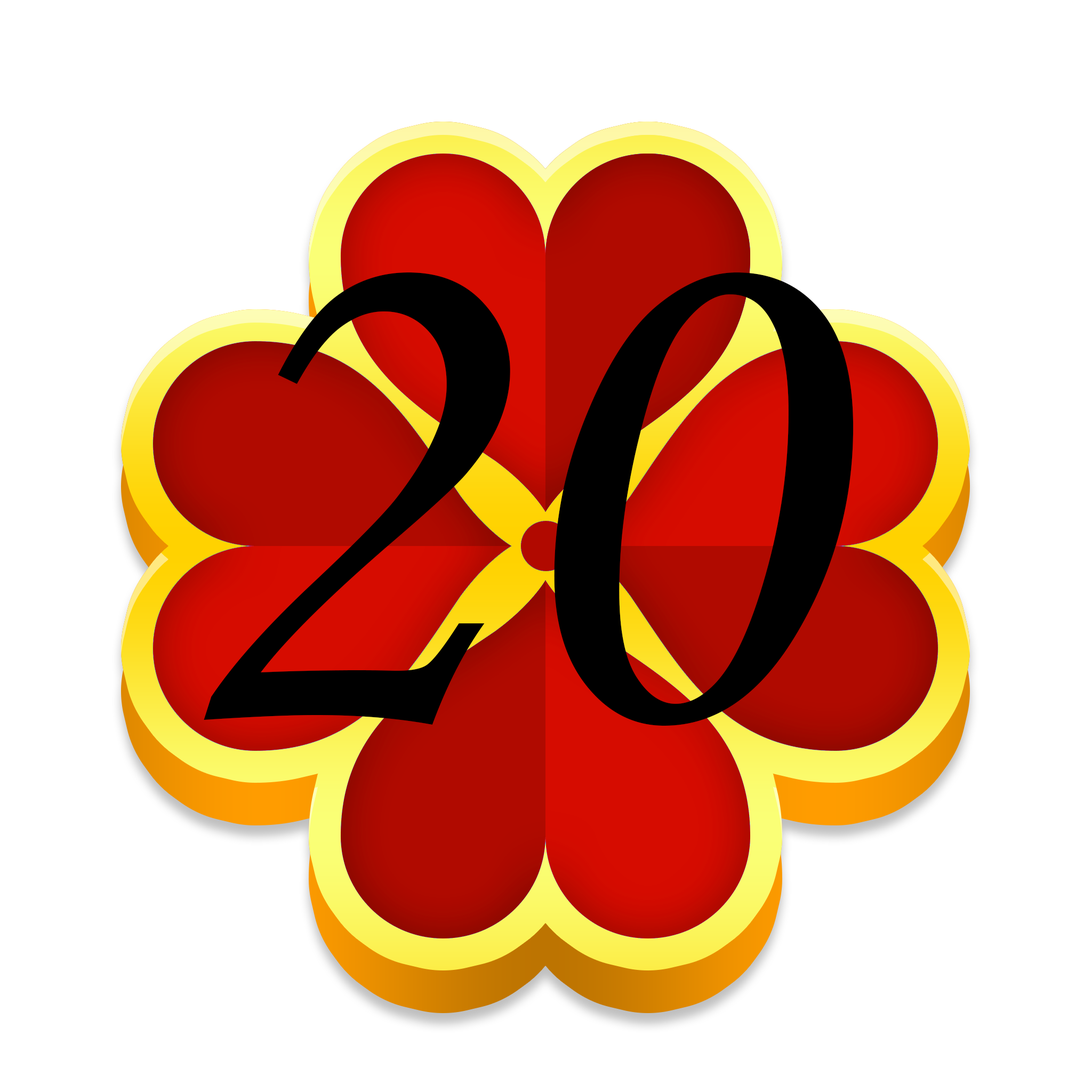
<style>
.page{position:relative;width:1092px;height:1092px;background:#ffffff}
.page>*{position:absolute;margin:0}
.t1{font:755.4px "MonotypeCorsiva";letter-spacing:-0.005em;color:#000000}
</style>
<div class="page">
<p class="t1" style="left:204px;top:272px;width:650px;height:454px">20</p>
</div>
